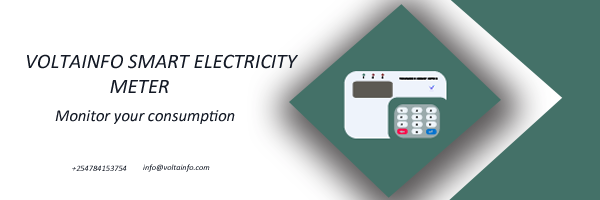
<style>
.page{position:relative;width:600px;height:200px;background:#ffffff}
.page>*{position:absolute;margin:0}
.t1{font:20.8px "Calibri-Italic";color:#131925}
.t2{font:16.7px "Calibri-Italic";color:#131925}
.t3{font:8.3px "Calibri-Italic";color:#131925}
.t4{font:8.3px "Calibri-Italic"}
</style>
<div class="page">
<p class="t1" style="left:27px;top:54px;width:271px;height:39px">VOLTAINFO SMART ELECTRICITY <br>                  METER</p>
<p class="t2" style="left:55px;top:110px;width:180px;height:14px">Monitor your consumption</p>
<p class="t3" style="left:72px;top:165px;width:55px;height:6px">+254784153754</p>
<p class="t4" style="left:143px;top:164px;width:67px;height:8px">info@voltainfo.com</p>
</div>
